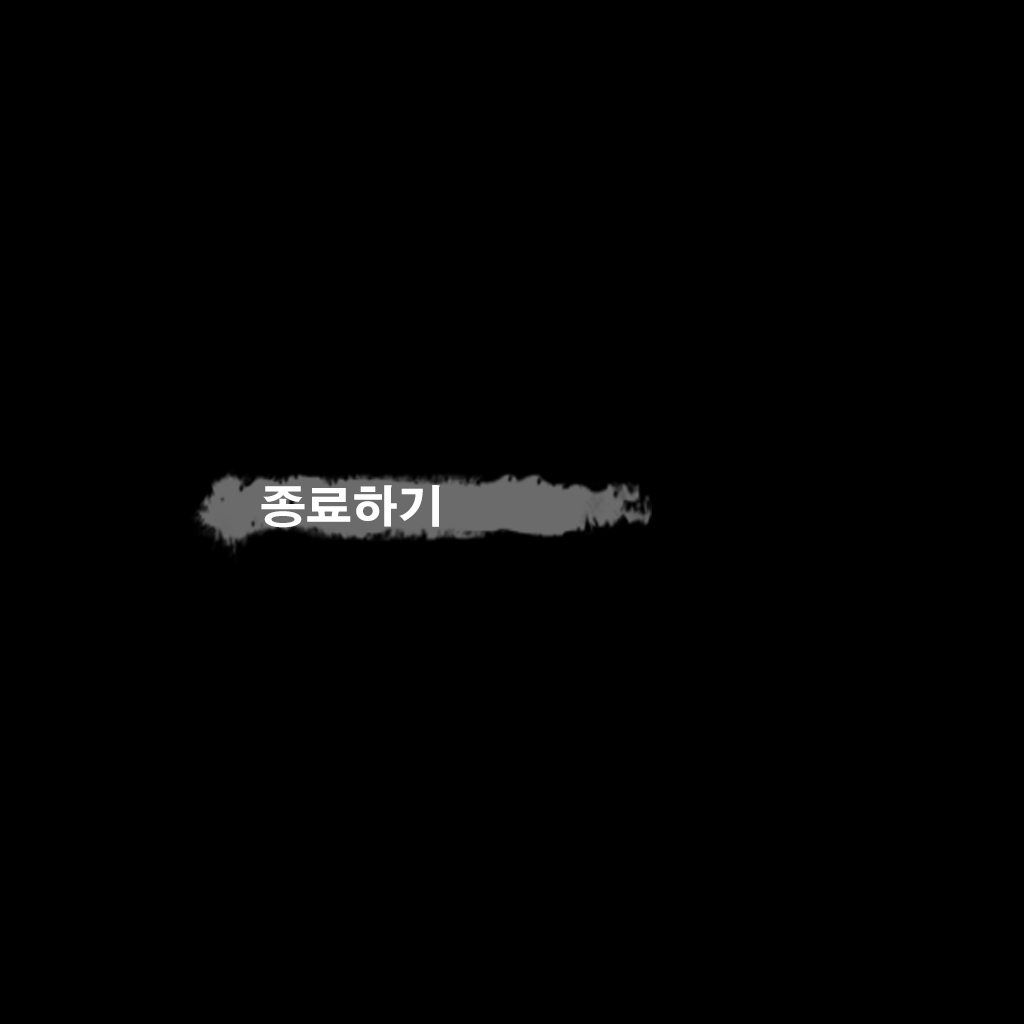
<style>
.page{position:relative;width:1024px;height:1024px;background:#000000}
.page>*{position:absolute;margin:0}
.t1{font:44.3px "HYgtrE";color:#ffffff;scale:1.04 1}
</style>
<div class="page">
<p class="t1" style="left:261px;top:485px;width:179px;height:43px">종료하기</p>
</div>
